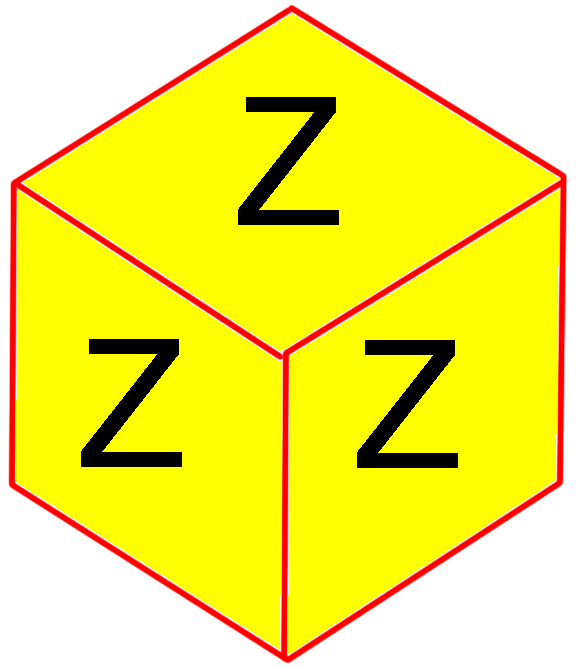
<style>
.page{position:relative;width:576px;height:667px;background:#ffff00}
.page>*{position:absolute;margin:0}
.t1{font:179.3px "ArialMT";color:#000000}
</style>
<div class="page">
<p class="t1" style="left:238px;top:97px;width:101px;height:128px">Z</p>
<p class="t1" style="left:81px;top:339px;width:101px;height:128px">Z</p>
<p class="t1" style="left:357px;top:340px;width:101px;height:128px">Z</p>
</div>
